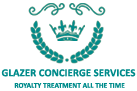
<style>
.page{position:relative;width:137px;height:91px;background:#ffffff}
.page>*{position:absolute;margin:0}
.t1{font:10.7px "Calibri-Bold";letter-spacing:0.01em;color:#008b8b}
.t2{font:13.5px "Calibri-Bold";letter-spacing:0.01em;color:#bd1009}
.t3{font:7.3px "Calibri-Bold";letter-spacing:0.01em;color:#008b8b}
.t4{font:6.7px "Calibri";letter-spacing:0.01em;color:#c7a26a}
</style>
<div class="page">
<p class="t1" style="left:1px;top:69px;width:135px;height:8px"><span class="t2"> </span>GLAZER CONCIERGE SERVICES</p>
<p class="t3" style="left:14px;top:83px;width:111px;height:5px"><span class="t4">       </span>ROYALTY TREATMENT ALL THE TIME</p>
</div>
